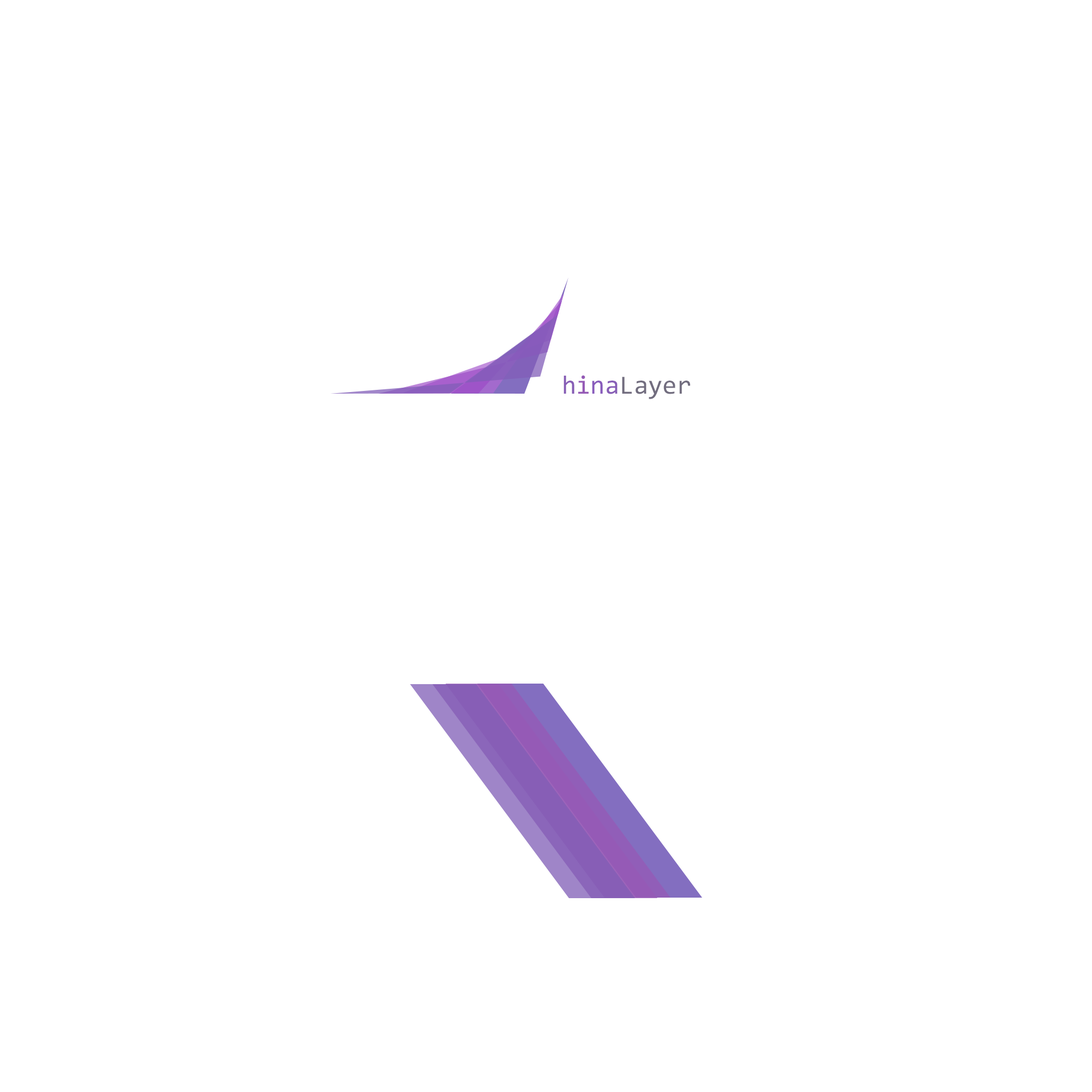
<style>
.page{position:relative;width:1092px;height:1092px;background:#ffffff}
.page>*{position:absolute;margin:0}
.t1{font:26.2px "YaHei-Consolas-Hybrid";color:#726d7f}
.t2{font:26.2px "YaHei-Consolas-Hybrid";color:#875eb6}
.t3{font:26.2px "YaHei-Consolas-Hybrid";color:#955ab6}
.t4{font:26.2px "YaHei-Consolas-Hybrid";color:#885bbc}
</style>
<div class="page">
<p class="t1" style="left:563px;top:375px;width:127px;height:24px"><span class="t2">h</span><span class="t3">i</span><span class="t4">n</span><span class="t2">a</span>Layer</p>
</div>
